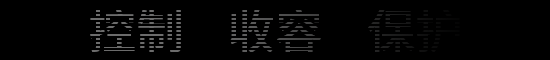
<style>
.page{position:relative;width:550px;height:60px;background:#000000}
.page>*{position:absolute;margin:0}
.t1{font:48px "SourceHanSansCN-Medium"}
</style>
<div class="page">
<p class="t1" style="left:90px;top:8px;width:370px;height:45px">控制    收容    保护</p>
</div>
